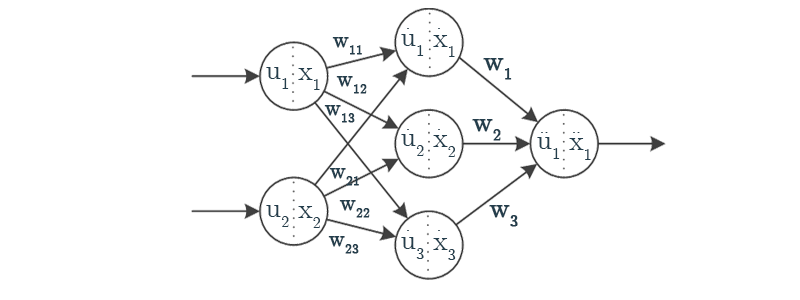
<style>
.page{position:relative;width:800px;height:300px;background:#ffffff}
.page>*{position:absolute;margin:0}
.t1{font:22.2px "CMUSerif-Roman";color:#243e4c;font-weight:bold}
.t2{font:27.8px "CMUSerif-Roman";color:#243e4c}
.t3{font:27.8px "CMUSerif-Roman";color:#243e4c;font-weight:bold}
</style>
<div class="page">
<p class="t1" style="left:332px;top:37px;width:30px;height:18px">w11</p>
<p class="t2" style="left:401px;top:34px;width:23px;height:22px">u1</p>
<p class="t2" style="left:433px;top:35px;width:22px;height:22px">x1</p>
<p class="t3" style="left:483px;top:58px;width:29px;height:22px">w1</p>
<p class="t2" style="left:266px;top:67px;width:23px;height:22px">u1</p>
<p class="t2" style="left:298px;top:68px;width:22px;height:22px">x1</p>
<p class="t1" style="left:336px;top:76px;width:31px;height:18px">w12</p>
<p class="t1" style="left:324px;top:105px;width:31px;height:18px">w13</p>
<p class="t3" style="left:472px;top:119px;width:29px;height:22px">w2</p>
<p class="t2" style="left:401px;top:134px;width:23px;height:22px">u2</p>
<p class="t2" style="left:433px;top:135px;width:22px;height:22px">x2</p>
<p class="t2" style="left:537px;top:137px;width:23px;height:22px">u1</p>
<p class="t2" style="left:541px;top:132px;width:7px;height:1px">..</p>
<p class="t2" style="left:573px;top:132px;width:7px;height:1px">..</p>
<p class="t2" style="left:569px;top:138px;width:22px;height:22px">x1</p>
<p class="t1" style="left:329px;top:168px;width:30px;height:18px">w21</p>
<p class="t2" style="left:266px;top:205px;width:23px;height:22px">u2</p>
<p class="t2" style="left:298px;top:206px;width:22px;height:22px">x2</p>
<p class="t1" style="left:339px;top:200px;width:31px;height:18px">w22</p>
<p class="t3" style="left:489px;top:205px;width:29px;height:22px">w3</p>
<p class="t1" style="left:328px;top:236px;width:31px;height:18px">w23</p>
<p class="t2" style="left:401px;top:237px;width:23px;height:22px">u3</p>
<p class="t2" style="left:433px;top:238px;width:23px;height:22px">x3</p>
</div>
